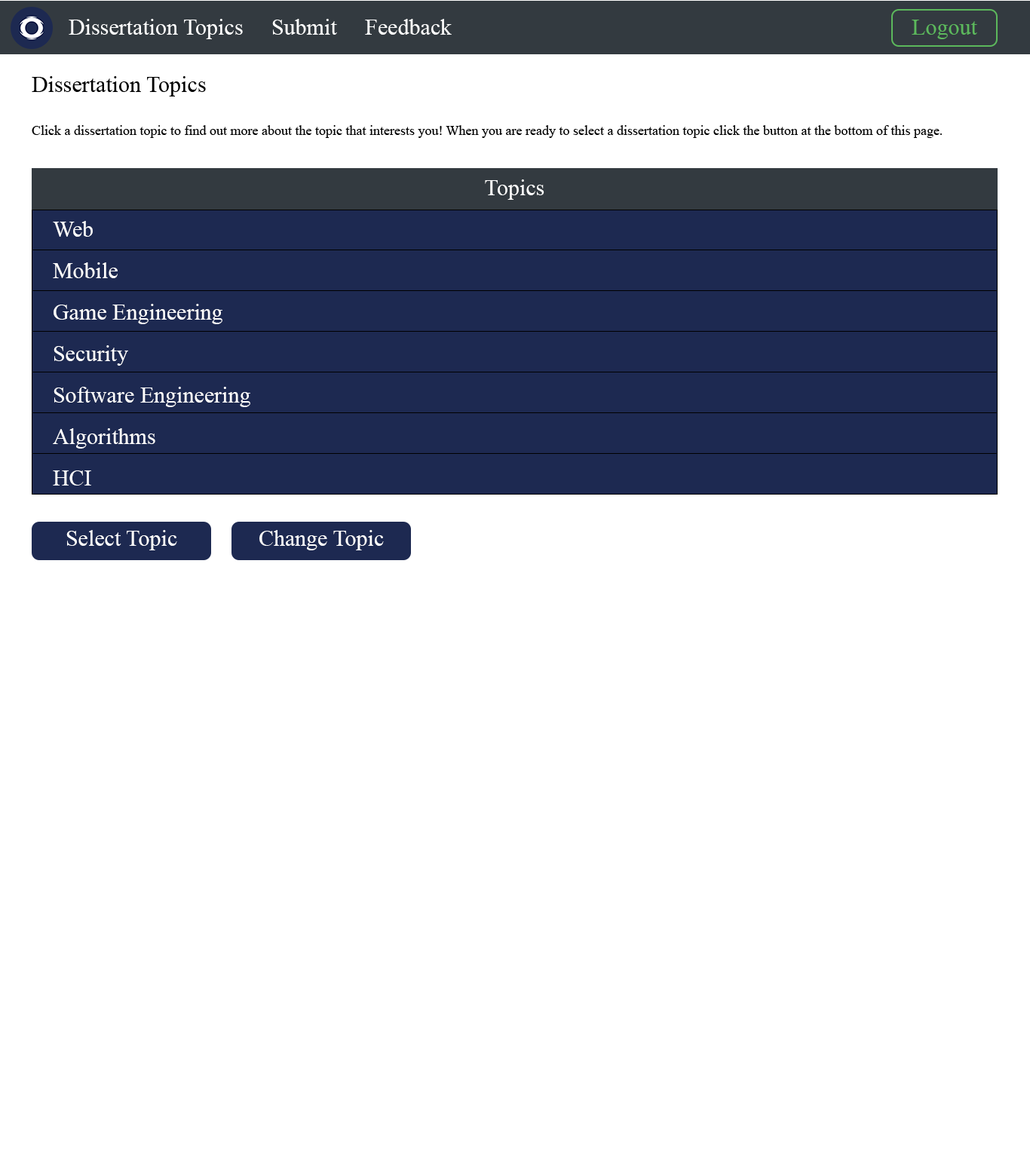
<style>
.page{position:relative;width:1030px;height:1158px;background:#ffffff}
.page>*{position:absolute;margin:0}
.t1{font:22.6px "TimesNewRomanPSMT";color:#ffffff}
.t2{font:22.6px "TimesNewRomanPSMT";color:#5cb85c}
.t3{font:13.6px "TimesNewRomanPSMT";color:#000000}
.t4{font:22.6px "TimesNewRomanPSMT";color:#000000}
</style>
<div class="page">
<p class="t1" style="left:69px;top:19px;width:383px;height:20px">Dissertation Topics     Submit     Feedback</p>
<p class="t2" style="left:911px;top:20px;width:66px;height:19px">Logout</p>
<p class="t3" style="left:32px;top:76px;width:910px;height:62px"><span class="t4">Dissertation Topics<br><br></span>Click a dissertation topic to find out more about the topic that interests you! When you are ready to select a dissertation topic click the button at the bottom of this page.</p>
<p class="t1" style="left:485px;top:179px;width:59px;height:21px">Topics</p>
<p class="t1" style="left:53px;top:221px;width:40px;height:16px">Web</p>
<p class="t1" style="left:53px;top:262px;width:65px;height:16px">Mobile</p>
<p class="t1" style="left:54px;top:304px;width:168px;height:20px">Game Engineering</p>
<p class="t1" style="left:54px;top:345px;width:74px;height:21px">Security</p>
<p class="t1" style="left:54px;top:387px;width:196px;height:20px">Software Engineering</p>
<p class="t1" style="left:53px;top:428px;width:102px;height:21px">Algorithms</p>
<p class="t1" style="left:53px;top:470px;width:38px;height:15px">HCI</p>
<p class="t1" style="left:66px;top:530px;width:111px;height:20px">Select Topic</p>
<p class="t1" style="left:259px;top:530px;width:125px;height:20px">Change Topic</p>
</div>
